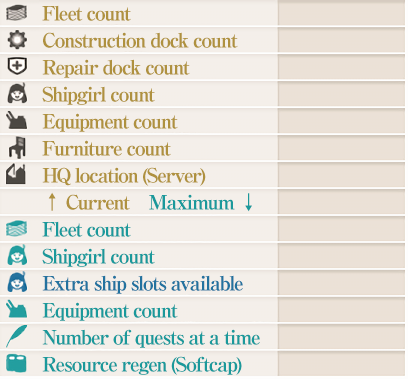
<style>
.page{position:relative;width:408px;height:379px;background:#f4efea}
.page>*{position:absolute;margin:0}
.t1{font:20px/27px "RyuminPro-ExBold";letter-spacing:-0.08em;color:#af913f}
.t2{font:20px/27px "RyuminPro-ExBold";letter-spacing:-0.08em;color:#1a999b}
.t3{font:20px/27px "RyuminPro-ExBold";letter-spacing:-0.08em;color:#23729f}
</style>
<div class="page">
<p class="t1" style="left:42px;top:5px;width:218px;height:370px">Fleet count<br>Construction dock count<br>Repair dock count<br>Shipgirl count<br>Equipment count<br>Furniture count<br>HQ location (Server)<br>← Current    <span class="t2">Maximum ↓<br>Fleet count<br>Shipgirl count<br></span><span class="t3">Extra ship slots available<br></span><span class="t2">Equipment count<br>Number of quests at a time<br>Resource regen (Softcap)</span></p>
</div>
